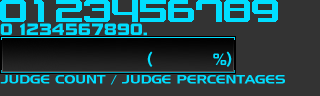
<style>
.page{position:relative;width:320px;height:96px;background:#333333}
.page>*{position:absolute;margin:0}
.t1{font:16px "DFSoGei-W9-WING-RKSJ-H";letter-spacing:-0.15em;color:#00deff}
.t2{font:16px "DFSoGei-W9-WING-RKSJ-H";letter-spacing:-0.15em;color:#00deff;scale:1.04 1}
.t3{font:16px "DFSoGei-W9-WING-RKSJ-H";letter-spacing:-0.15em;color:#00deff;scale:1.32 1}
.t4{font:12px "HanzelWideNormal";color:#00deff}
</style>
<div class="page">
<p class="t1" style="left:0px;top:23px;width:12px;height:12px">0</p>
<p class="t1" style="left:20px;top:23px;width:5px;height:12px">1</p>
<p class="t1" style="left:26px;top:23px;width:12px;height:12px">2</p>
<p class="t2" style="left:40px;top:23px;width:11px;height:12px">3</p>
<p class="t1" style="left:52px;top:23px;width:12px;height:12px">4</p>
<p class="t2" style="left:66px;top:23px;width:11px;height:12px">5</p>
<p class="t1" style="left:78px;top:23px;width:12px;height:12px">6</p>
<p class="t1" style="left:92px;top:23px;width:11px;height:12px">7</p>
<p class="t1" style="left:104px;top:23px;width:12px;height:12px">8</p>
<p class="t1" style="left:117px;top:23px;width:12px;height:12px">9</p>
<p class="t1" style="left:130px;top:23px;width:12px;height:12px">0</p>
<p class="t3" style="left:143px;top:32px;width:4px;height:4px">.</p>
<p class="t4" style="left:0px;top:75px;width:285px;height:10px">JUDGE COUNT / JUDGE PERCENTAGES</p>
</div>
